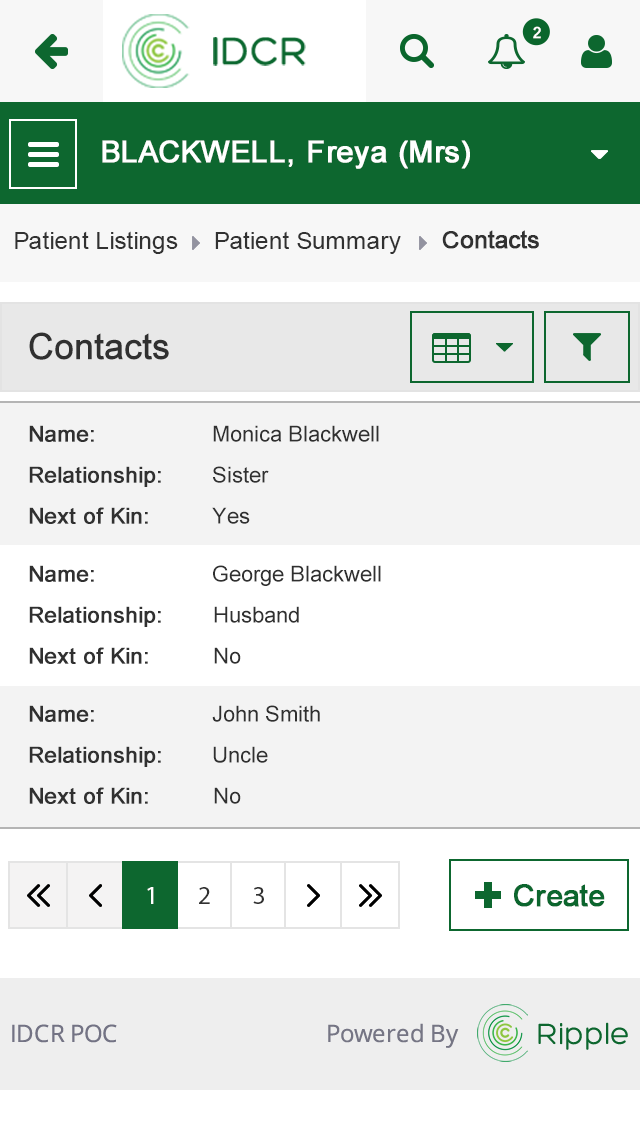
<style>
.page{position:relative;width:640px;height:1144px;background:#ffffff}
.page>*{position:absolute;margin:0}
.t1{font:24px "ArialMT";color:#313131}
.t2{font:24px "ArialMT";color:#313131;font-weight:bold}
.t3{font:36px "ArialMT";color:#303030;font-weight:bold}
.t4{font:22px "ArialMT";color:#303030;font-weight:bold}
.t5{font:22px "ArialMT";color:#303030}
</style>
<div class="page">
<p class="t1" style="left:15px;top:231px;width:163px;height:23px">Patient Listings</p>
<p class="t1" style="left:215px;top:231px;width:186px;height:23px">Patient Summary</p>
<p class="t2" style="left:442px;top:230px;width:97px;height:19px">Contacts</p>
<p class="t3" style="left:29px;top:332px;width:140px;height:28px">Contacts</p>
<p class="t4" style="left:29px;top:425px;width:65px;height:17px">Name:</p>
<p class="t5" style="left:213px;top:425px;width:166px;height:17px">Monica Blackwell</p>
<p class="t4" style="left:29px;top:466px;width:132px;height:21px">Relationship:</p>
<p class="t5" style="left:213px;top:466px;width:56px;height:17px">Sister</p>
<p class="t4" style="left:29px;top:507px;width:119px;height:17px">Next of Kin:</p>
<p class="t5" style="left:212px;top:507px;width:38px;height:17px">Yes</p>
<p class="t4" style="left:29px;top:565px;width:65px;height:17px">Name:</p>
<p class="t5" style="left:213px;top:565px;width:168px;height:21px">George Blackwell</p>
<p class="t4" style="left:29px;top:606px;width:132px;height:21px">Relationship:</p>
<p class="t5" style="left:214px;top:606px;width:85px;height:17px">Husband</p>
<p class="t4" style="left:29px;top:647px;width:119px;height:17px">Next of Kin:</p>
<p class="t5" style="left:214px;top:647px;width:27px;height:17px">No</p>
<p class="t4" style="left:29px;top:705px;width:65px;height:17px">Name:</p>
<p class="t5" style="left:212px;top:705px;width:108px;height:17px">John Smith</p>
<p class="t4" style="left:29px;top:746px;width:132px;height:21px">Relationship:</p>
<p class="t5" style="left:213px;top:746px;width:55px;height:17px">Uncle</p>
<p class="t4" style="left:29px;top:787px;width:119px;height:17px">Next of Kin:</p>
<p class="t5" style="left:214px;top:787px;width:27px;height:17px">No</p>
</div>
